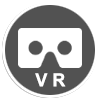
<style>
.page{position:relative;width:100px;height:100px;background:#ffffff}
.page>*{position:absolute;margin:0}
.t1{font:18px "Arial-BoldMT";color:#ffffff}
</style>
<div class="page">
<p class="t1" style="left:35px;top:73px;width:31px;height:14px">V R</p>
</div>
